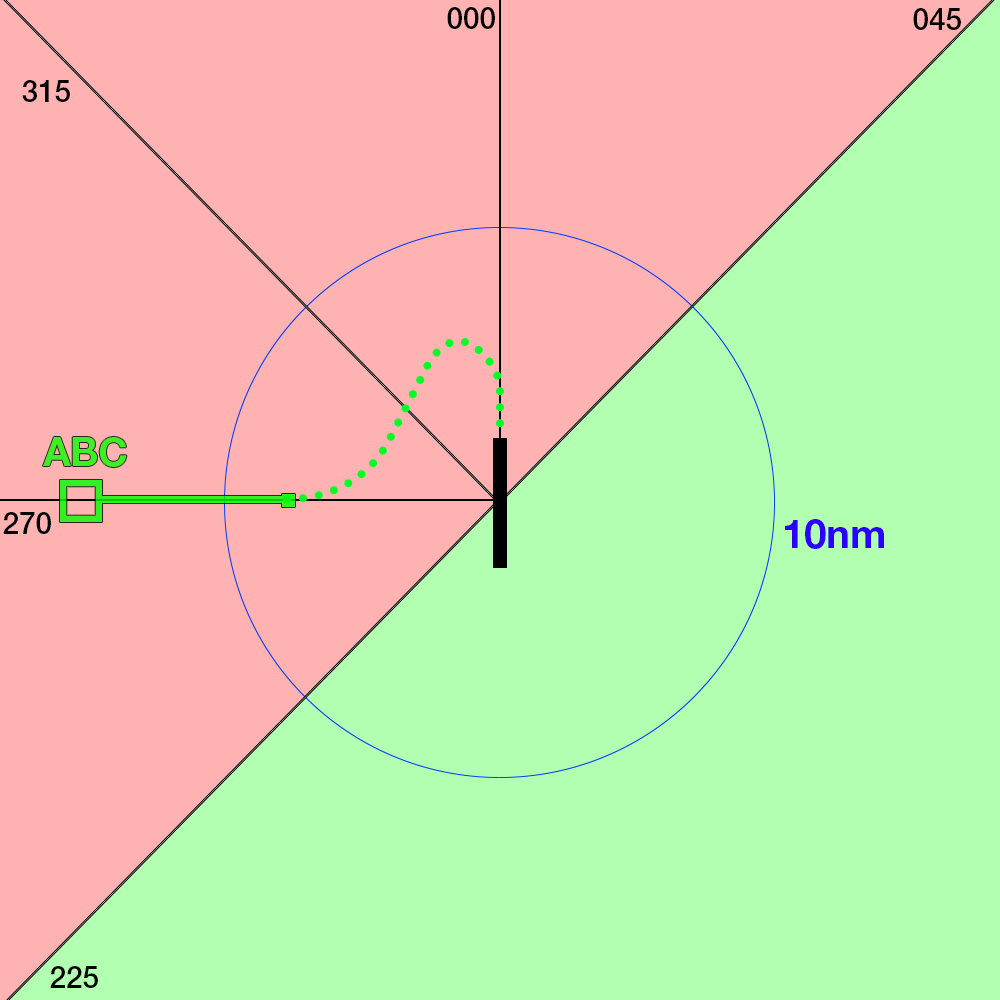
<style>
.page{position:relative;width:1000px;height:1000px;background:#b2ffb2}
.page>*{position:absolute;margin:0}
.t1{font:29.7px "HelveticaNeueLTStd-Md";color:#000000}
.t2{font:40px "HelveticaNeueLTStd-Bd";color:#3df024}
.t3{font:40px "HelveticaNeueLTStd-Bd";color:#2a00ff}
</style>
<div class="page">
<p class="t1" style="left:447px;top:7px;width:48px;height:22px">000</p>
<p class="t1" style="left:913px;top:8px;width:48px;height:22px">045</p>
<p class="t1" style="left:22px;top:80px;width:48px;height:22px">315</p>
<p class="t2" style="left:43px;top:437px;width:84px;height:30px">ABC</p>
<p class="t1" style="left:3px;top:512px;width:48px;height:22px">270</p>
<p class="t3" style="left:785px;top:519px;width:99px;height:30px">10nm</p>
<p class="t1" style="left:50px;top:966px;width:48px;height:22px">225</p>
</div>
